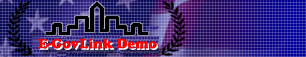
<style>
.page{position:relative;width:306px;height:57px}
.page>*{position:absolute;margin:0}
.t1{font:14px "CooperBlack";color:#ff0000}
.t2{font:14px "CooperBlack"}
</style>
<div class="page">
<p class="t1" style="left:38px;top:38px;width:119px;height:11px">E-GovLink Demo</p>
<p class="t2" style="left:39px;top:40px;width:119px;height:10px">E-GovLink Demo</p>
</div>
